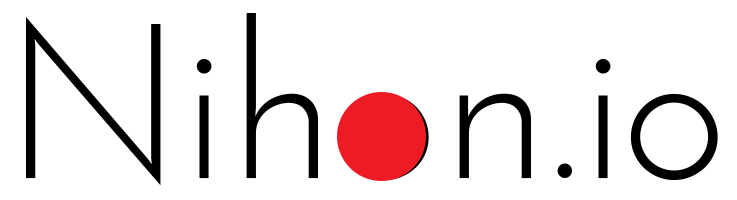
<style>
.page{position:relative;width:737px;height:200px;background:#ffffff}
.page>*{position:absolute;margin:0}
.t1{font:219.9px "JosefinSans";color:#000000}
</style>
<div class="page">
<p class="t1" style="left:26px;top:13px;width:692px;height:173px">Nihon.io</p>
</div>
